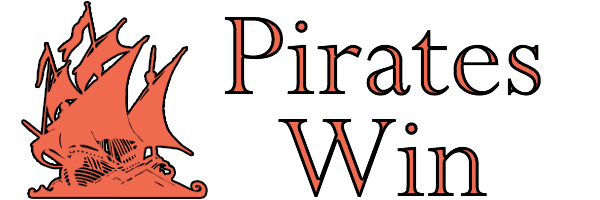
<style>
.page{position:relative;width:600px;height:200px;background:#ffffff}
.page>*{position:absolute;margin:0}
.t1{font:133.3px "Perpetua"}
</style>
<div class="page">
<p class="t1" style="left:224px;top:17px;width:317px;height:79px">Pirates</p>
<p class="t1" style="left:278px;top:119px;width:209px;height:78px">Win</p>
</div>
